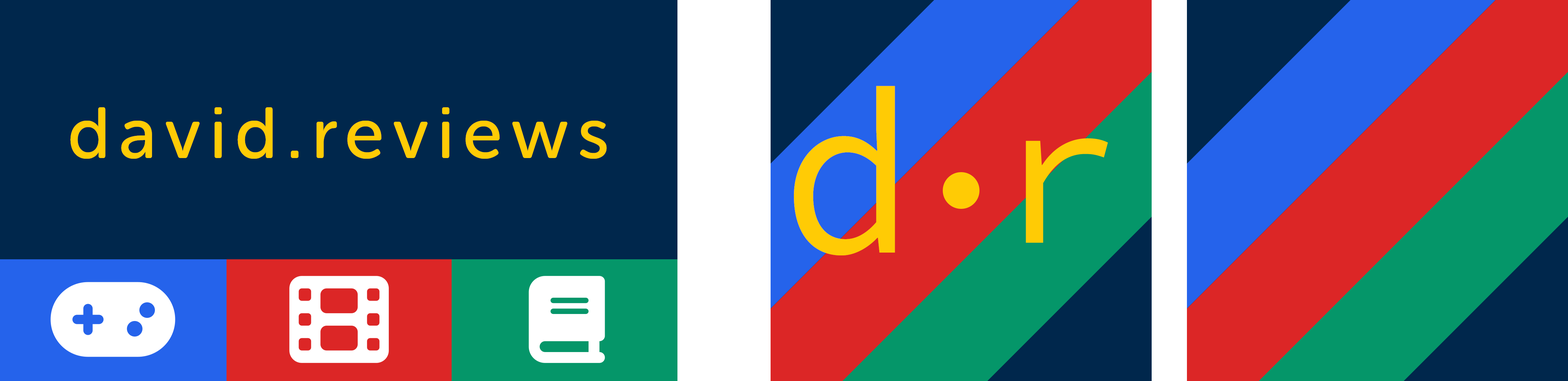
<style>
.page{position:relative;width:1568px;height:381px;background:#00274c}
.page>*{position:absolute;margin:0}
.t1{font:233.9px "SourceCodePro-Regular";letter-spacing:0.12em;color:#ffcb05;scale:0.96 1}
.t2{font:72.1px "MuseoSansRounded-500";letter-spacing:0.12em;color:#ffcb05}
.t3{font:209.5px "SourceCodePro-Regular";letter-spacing:-0.08em;color:#ffcb05}
</style>
<div class="page">
<p class="t1" style="left:794px;top:86px;width:101px;height:169px">d</p>
<p class="t2" style="left:70px;top:107px;width:537px;height:52px">david.reviews</p>
<p class="t3" style="left:1026px;top:138px;width:82px;height:105px">r</p>
</div>
